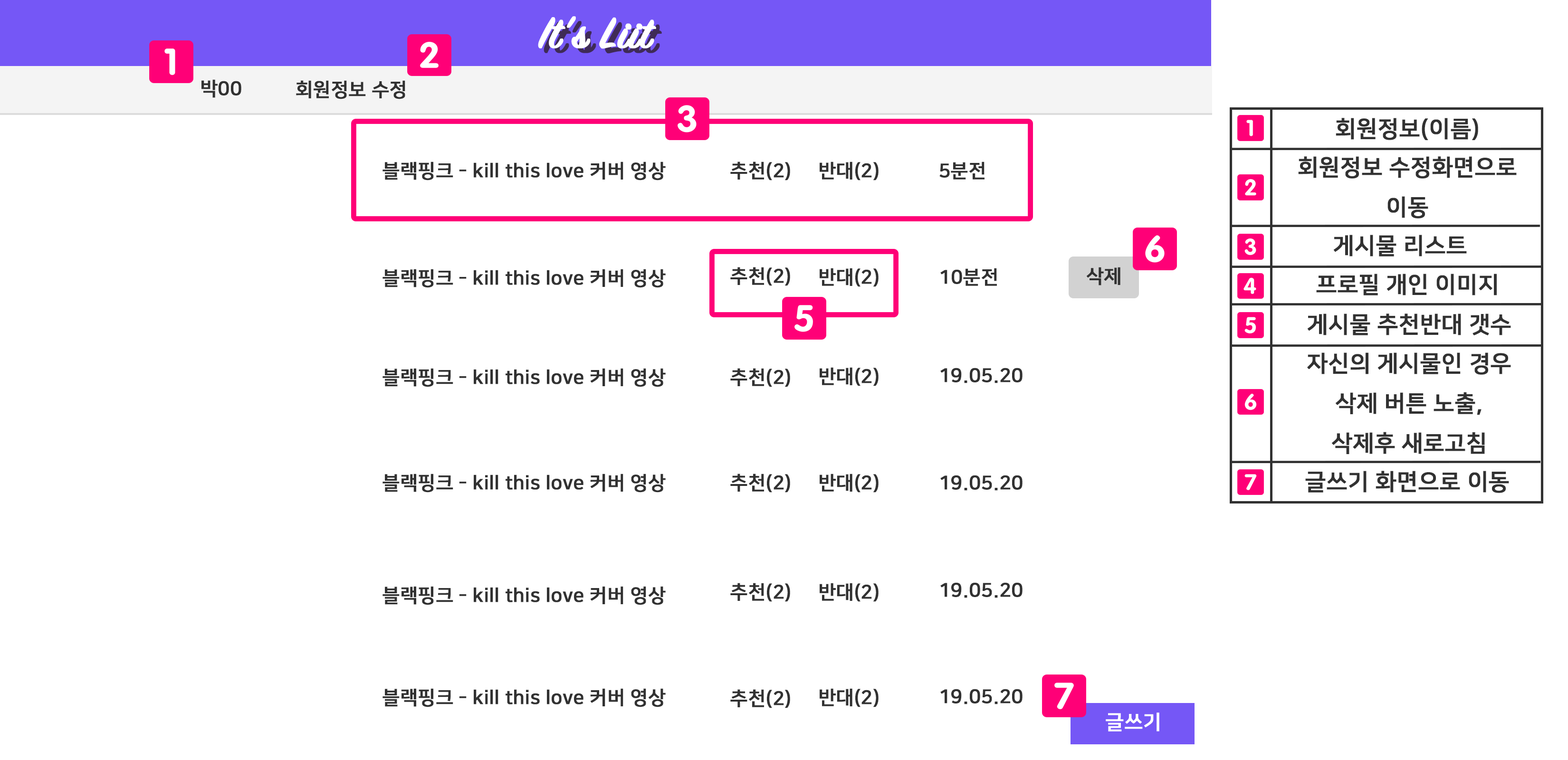
<style>
.page{position:relative;width:1568px;height:760px;background:#ffffff}
.page>*{position:absolute;margin:0}
.t1{font:47.5px "SignPainter-HouseScriptSemibold";color:#ffffff;font-weight:bold}
.t2{font:47.5px "SignPainter-HouseScriptSemibold";color:#3f2b56;font-weight:bold}
.t3{font:19px "NanumSquareB";color:#313131;font-weight:bold}
.t4{font:22.8px "NanumSquareB";color:#313131;font-weight:bold}
.t5{font:20px "NanumSquareB";color:#ffffff;font-weight:bold}
</style>
<div class="page">
<p class="t1" style="left:538px;top:16px;width:118px;height:33px">It’s Liit</p>
<p class="t2" style="left:544px;top:21px;width:118px;height:33px">It’s Liit</p>
<p class="t3" style="left:201px;top:79px;width:40px;height:19px">박00</p>
<p class="t3" style="left:296px;top:80px;width:109px;height:19px">회원정보 수정</p>
<p class="t4" style="left:1336px;top:118px;width:142px;height:22px">회원정보(이름)</p>
<p class="t3" style="left:382px;top:162px;width:284px;height:19px">블랙핑크 - kill this love 커버 영상</p>
<p class="t3" style="left:730px;top:162px;width:60px;height:19px">추천(2)</p>
<p class="t3" style="left:820px;top:162px;width:59px;height:19px">반대(2)</p>
<p class="t3" style="left:939px;top:162px;width:46px;height:18px">5분전</p>
<p class="t4" style="left:1298px;top:156px;width:219px;height:63px;text-align:center">회원정보 수정화면으로<br>이동</p>
<p class="t4" style="left:1334px;top:235px;width:133px;height:22px">게시물 리스트</p>
<p class="t3" style="left:382px;top:269px;width:284px;height:19px">블랙핑크 - kill this love 커버 영상</p>
<p class="t3" style="left:730px;top:267px;width:60px;height:19px">추천(2)</p>
<p class="t3" style="left:820px;top:268px;width:59px;height:19px">반대(2)</p>
<p class="t3" style="left:940px;top:268px;width:57px;height:18px">10분전</p>
<p class="t3" style="left:1087px;top:267px;width:33px;height:19px">삭제</p>
<p class="t4" style="left:1316px;top:274px;width:181px;height:22px">프로필 개인 이미지</p>
<p class="t4" style="left:1308px;top:314px;width:203px;height:21px">게시물 추천반대 갯수</p>
<p class="t4" style="left:1307px;top:353px;width:204px;height:101px;text-align:center">자신의 게시물인 경우<br>삭제 버튼 노출, <br>삭제후 새로고침</p>
<p class="t3" style="left:382px;top:368px;width:284px;height:19px">블랙핑크 - kill this love 커버 영상</p>
<p class="t3" style="left:730px;top:368px;width:60px;height:19px">추천(2)</p>
<p class="t3" style="left:820px;top:367px;width:59px;height:19px">반대(2)</p>
<p class="t3" style="left:940px;top:368px;width:83px;height:15px">19.05.20</p>
<p class="t3" style="left:382px;top:474px;width:284px;height:19px">블랙핑크 - kill this love 커버 영상</p>
<p class="t3" style="left:730px;top:474px;width:60px;height:19px">추천(2)</p>
<p class="t3" style="left:820px;top:474px;width:59px;height:19px">반대(2)</p>
<p class="t4" style="left:1305px;top:471px;width:204px;height:22px">글쓰기 화면으로 이동</p>
<p class="t3" style="left:940px;top:475px;width:83px;height:16px">19.05.20</p>
<p class="t3" style="left:382px;top:586px;width:284px;height:19px">블랙핑크 - kill this love 커버 영상</p>
<p class="t3" style="left:730px;top:583px;width:60px;height:19px">추천(2)</p>
<p class="t3" style="left:820px;top:583px;width:59px;height:19px">반대(2)</p>
<p class="t3" style="left:940px;top:583px;width:83px;height:15px">19.05.20</p>
<p class="t3" style="left:382px;top:688px;width:284px;height:20px">블랙핑크 - kill this love 커버 영상</p>
<p class="t3" style="left:730px;top:689px;width:60px;height:19px">추천(2)</p>
<p class="t3" style="left:820px;top:688px;width:59px;height:20px">반대(2)</p>
<p class="t3" style="left:940px;top:689px;width:83px;height:16px">19.05.20</p>
<p class="t5" style="left:1106px;top:713px;width:53px;height:19px">글쓰기</p>
</div>
